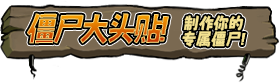
<style>
.page{position:relative;width:279px;height:83px;background:#ffffff}
.page>*{position:absolute;margin:0}
.t1{font:35.5px "MaokenAssortedSansBold-Regular";letter-spacing:-0.12em;scale:0.96 1}
.t2{font:35.5px "HouseofTerror";letter-spacing:-0.12em;scale:0.96 1}
.t3{font:17.3px/15.8px "MaokenAssortedSansBold-Regular";color:#f4e291;scale:0.96 1}
.t4{font:17.3px/15.8px "HouseofTerror";color:#f4e291;scale:0.96 1}
</style>
<div class="page">
<p class="t1" style="left:27px;top:13px;width:142px;height:31px">僵尸大头贴<span class="t2">!</span></p>
<p class="t3" style="left:182px;top:15px;width:64px;height:32px;text-align:justify">制作你的<br>专属僵尸<span class="t4">!</span></p>
</div>
